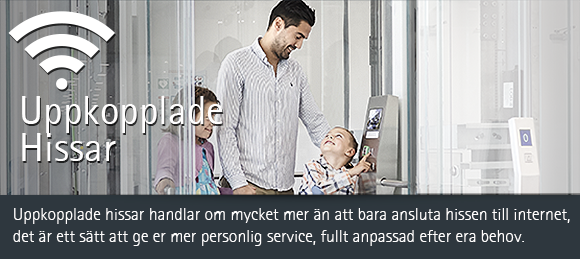
<style>
.page{position:relative;width:580px;height:259px}
.page>*{position:absolute;margin:0}
.t1{font:40.5px "AgfaRotisSansSerif";color:#fffefe}
.t2{font:17.8px/22px "AgfaRotisSansSerifLight";color:#fffefe}
</style>
<div class="page">
<p class="t1" style="left:22px;top:96px;width:201px;height:65px">Uppkopplade Hissar</p>
<p class="t2" style="left:13px;top:208px;width:557px;height:38px">Uppkopplade hissar handlar om mycket mer än att bara ansluta hissen till internet, det är ett sätt att ge er mer personlig service, fullt anpassad efter era behov.</p>
</div>
